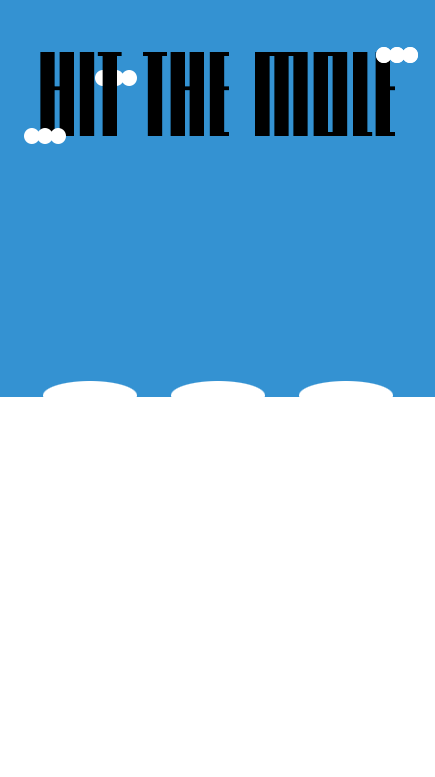
<style>
.page{position:relative;width:435px;height:777px;background:#ffffff}
.page>*{position:absolute;margin:0}
.t1{font:96px "Knifer-300";letter-spacing:0.01em;color:#000000;scale:1.25 1}
</style>
<div class="page">
<p class="t1" style="left:40px;top:52px;width:355px;height:84px">HIT THE MOLE</p>
</div>
